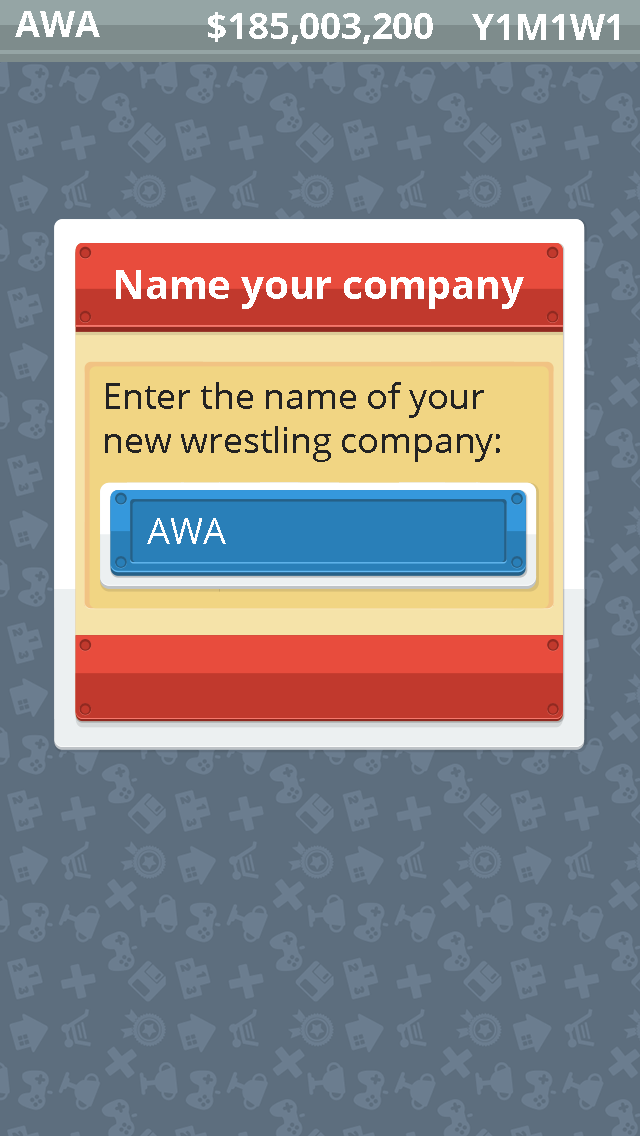
<style>
.page{position:relative;width:640px;height:1136px;background:#5d6e7e}
.page>*{position:absolute;margin:0}
.t1{font:36px "OpenSans-Bold";letter-spacing:-0.005em;color:#ffffff}
.t2{font:40px "OpenSans-Bold";letter-spacing:-0.005em;color:#ffffff}
.t3{font:36px "OpenSans";letter-spacing:-0.005em;color:#232323}
.t4{font:36px "OpenSans";letter-spacing:-0.005em;color:#ffffff}
</style>
<div class="page">
<p class="t1" style="left:15px;top:11px;width:85px;height:26px">AWA</p>
<p class="t1" style="left:208px;top:12px;width:225px;height:32px">$185,003,200</p>
<p class="t1" style="left:472px;top:14px;width:147px;height:26px">Y1M1W1</p>
<p class="t2" style="left:116px;top:270px;width:408px;height:39px">Name your company</p>
<p class="t3" style="left:105px;top:382px;width:395px;height:80px">Enter the name of your new wrestling company:</p>
<p class="t4" style="left:147px;top:518px;width:79px;height:26px">AWA</p>
</div>
